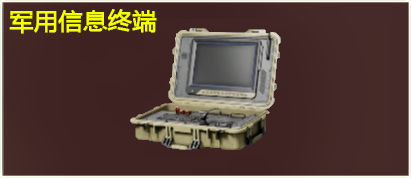
<style>
.page{position:relative;width:411px;height:178px}
.page>*{position:absolute;margin:0}
.t1{font:24px "MicrosoftYaHeiUI";color:#f4ff00;font-weight:bold}
</style>
<div class="page">
<p class="t1" style="left:9px;top:9px;width:148px;height:25px">军用信息终端</p>
</div>
